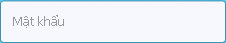
<style>
.page{position:relative;width:226px;height:43px;background:#f7f8fd}
.page>*{position:absolute;margin:0}
.t1{font:13px "Tahoma";color:#999898}
</style>
<div class="page">
<p class="t1" style="left:13px;top:15px;width:51px;height:13px">Mật khẩu</p>
</div>
